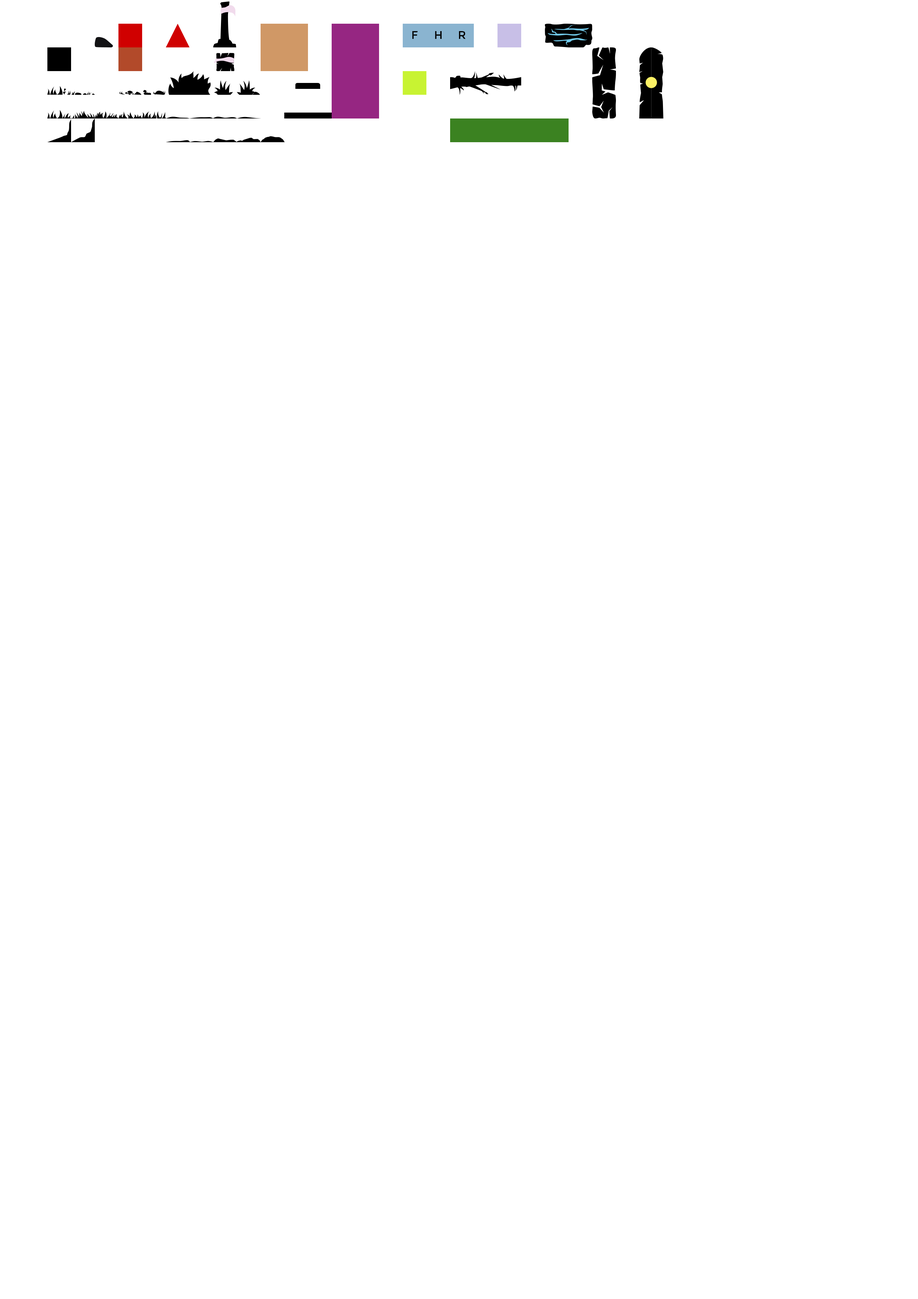
<style>
.page{position:relative;width:918px;height:1299px;background:#ffffff}
.page>*{position:absolute;margin:0}
.t1{font:11.1px "Montreal-Regular";letter-spacing:0.04em;color:#000000}
</style>
<div class="page">
<p class="t1" style="left:412px;top:31px;width:6px;height:8px">F</p>
<p class="t1" style="left:435px;top:31px;width:7px;height:8px">H</p>
<p class="t1" style="left:459px;top:31px;width:7px;height:8px">R</p>
</div>
